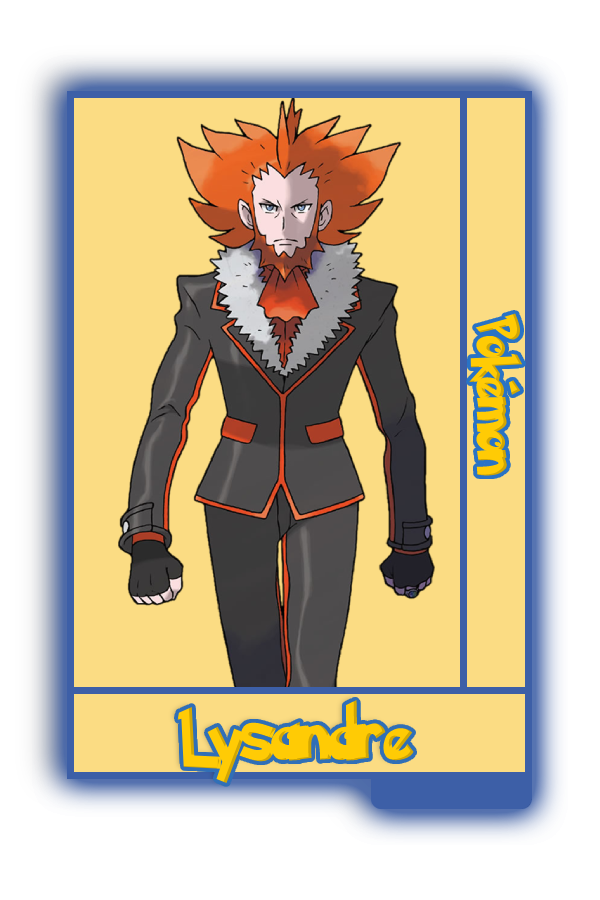
<style>
.page{position:relative;width:600px;height:900px;background:#fbdc83}
.page>*{position:absolute;margin:0}
.t1{font:48.8px "PokemonSolidNormal";color:#ffcb05;scale:0.8 1}
.t2{font:56.6px "PokemonSolidNormal";color:#ffcb05;scale:0.92 1}
</style>
<div class="page">
<p class="t1" style="left:469px;top:313px;width:54px;height:163px;rotate:90deg">Pokémon</p>
<p class="t2" style="left:177px;top:699px;width:237px;height:84px">Lysandre</p>
</div>
